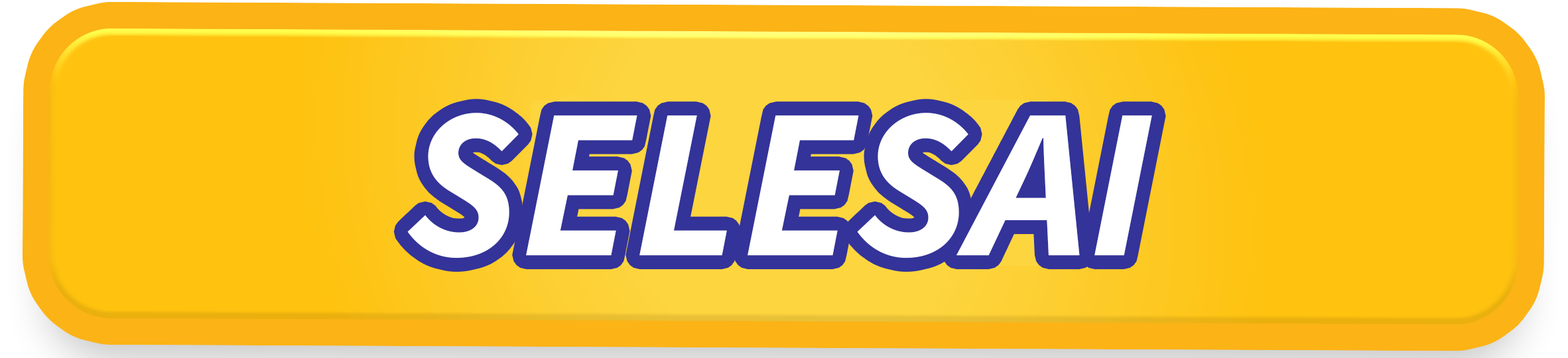
<style>
.page{position:relative;width:1568px;height:358px;background:#fec20f}
.page>*{position:absolute;margin:0}
.t1{font:214.5px "SourceSans3Italic-BoldItalic";letter-spacing:0.005em;color:#ffffff}
</style>
<div class="page">
<p class="t1" style="left:407px;top:113px;width:745px;height:145px">SELESAI</p>
</div>
